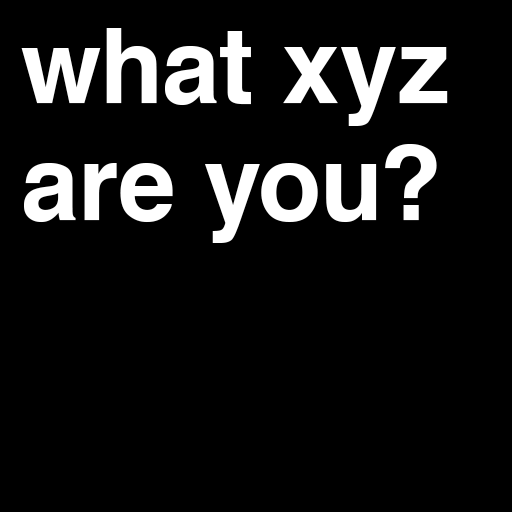
<style>
.page{position:relative;width:512px;height:512px;background:#000000}
.page>*{position:absolute;margin:0}
.t1{font:103.4px/116.8px "Helvetica-Bold";color:#ffffff}
</style>
<div class="page">
<p class="t1" style="left:21px;top:28px;width:427px;height:215px">what xyz<br>are you?</p>
</div>
